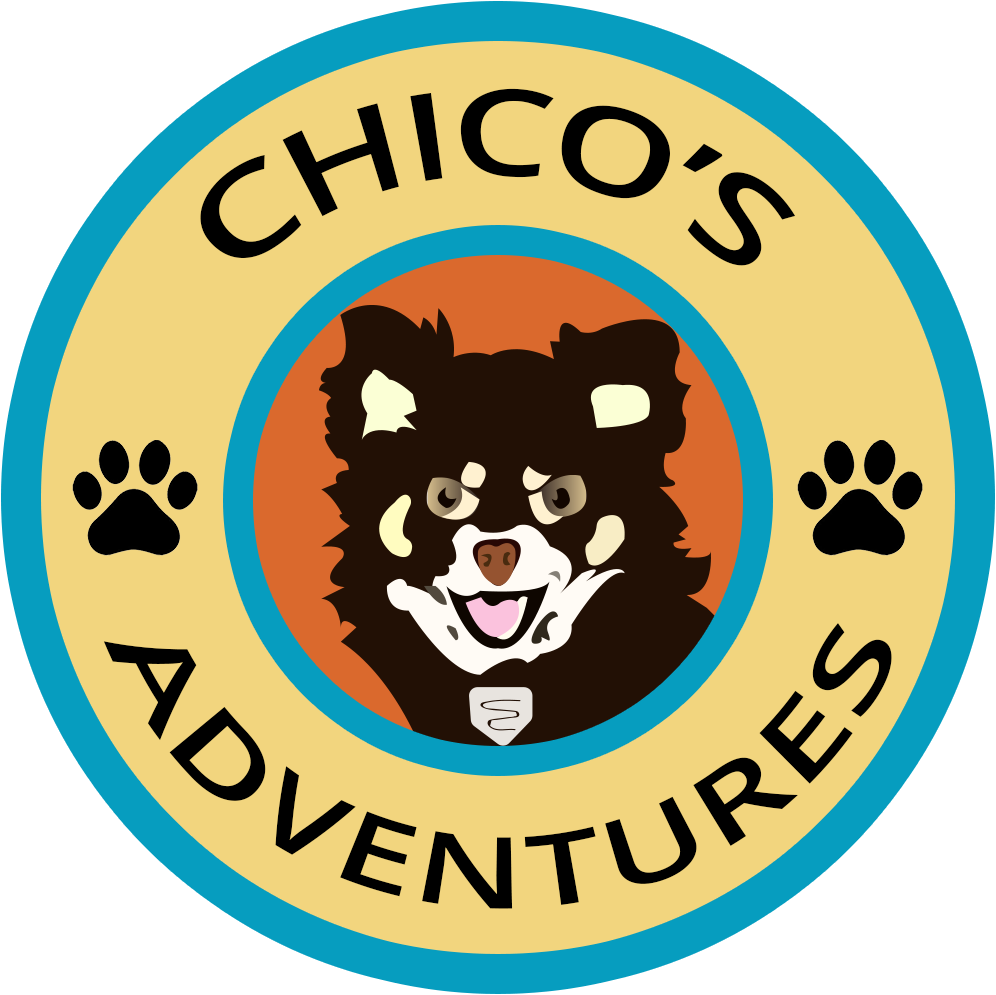
<style>
.page{position:relative;width:996px;height:995px;background:#f2d57e}
.page>*{position:absolute;margin:0}
.t1{font:120px "OpenSans-Semibold";color:#000000}
.t2{font:100px/100px "OpenSans-Semibold";color:#000000}
</style>
<div class="page">
<p class="t1" style="left:200px;top:88px;width:596px;height:178px">CHICO’S</p>
<p class="t2" style="left:103px;top:623px;width:789px;height:286px">ADVENTURES</p>
</div>
